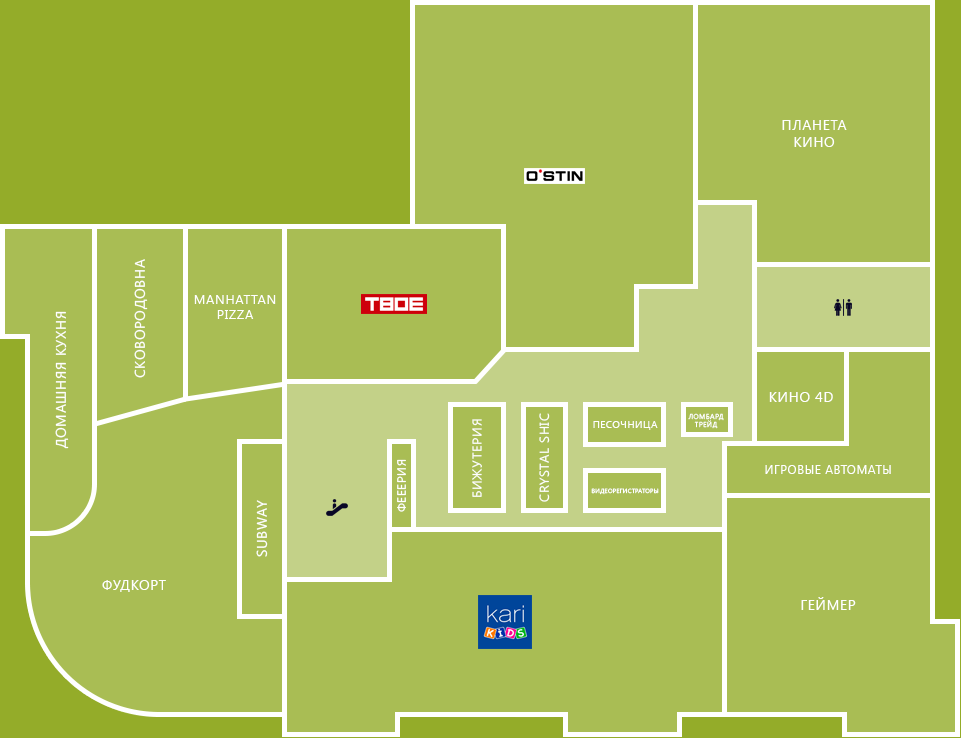
<style>
.page{position:relative;width:961px;height:738px;background:#a9bd54}
.page>*{position:absolute;margin:0}
.t1{font:14px "SegoeUI";letter-spacing:0.05em;color:#ffffff;text-transform:uppercase}
.t2{font:13px "SegoeUI";letter-spacing:0.05em;color:#ffffff;text-transform:uppercase}
.t3{font:7px "SegoeUI";letter-spacing:0.05em;color:#ffffff;text-transform:uppercase}
.t4{font:10px "SegoeUI";letter-spacing:0.05em;color:#ffffff;text-transform:uppercase}
.t5{font:12px "SegoeUI";letter-spacing:0.05em;color:#ffffff;text-transform:uppercase}
.t6{font:6px "SegoeUI";letter-spacing:0.05em;color:#ffffff;text-transform:uppercase}
</style>
<div class="page">
<p class="t1" style="left:782px;top:120px;width:65px;height:27px;text-align:center">Планета<br>кино</p>
<p class="t1" style="left:134px;top:259px;width:14px;height:119px;rotate:-90deg">Сковородовна</p>
<p class="t2" style="left:194px;top:295px;width:82px;height:24px;text-align:center">Manhattan<br>pizza</p>
<p class="t1" style="left:55px;top:311px;width:14px;height:138px;rotate:-90deg">Домашняя кухня</p>
<p class="t1" style="left:769px;top:392px;width:64px;height:10px">Кино 4D</p>
<p class="t2" style="left:539px;top:413px;width:11px;height:89px;rotate:-90deg">CRYSTAL SHIC</p>
<p class="t3" style="left:688px;top:413px;width:36px;height:16px;text-align:center">Ломбард<br>ТРЕЙД</p>
<p class="t2" style="left:472px;top:419px;width:10px;height:78px;rotate:-90deg">Бижутерия</p>
<p class="t4" style="left:593px;top:421px;width:65px;height:9px">Песочница</p>
<p class="t5" style="left:397px;top:459px;width:9px;height:53px;rotate:-90deg">Фееерия</p>
<p class="t5" style="left:765px;top:465px;width:126px;height:9px">Игровые автоматы</p>
<p class="t6" style="left:591px;top:488px;width:68px;height:7px">Видеорегистраторы</p>
<p class="t1" style="left:256px;top:500px;width:12px;height:57px;rotate:-90deg">Subway</p>
<p class="t1" style="left:102px;top:580px;width:64px;height:12px">Фудкорт</p>
<p class="t1" style="left:801px;top:597px;width:55px;height:13px">Геймер</p>
</div>
